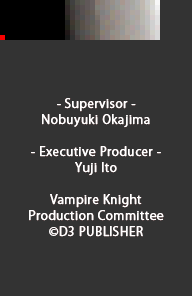
<style>
.page{position:relative;width:192px;height:296px;background:#333333}
.page>*{position:absolute;margin:0}
.t1{font:12px/16px "KozGoPr6N-Regular";letter-spacing:0.025em;color:#ffffff;font-weight:bold}
</style>
<div class="page">
<p class="t1" style="left:29px;top:98px;width:135px;height:139px;text-align:center">- Supervisor -<br>Nobuyuki Okajima<br><br>- Executive Producer -<br>Yuji Ito<br><br>Vampire Knight<br>Production Committee<br>©D3 PUBLISHER</p>
</div>
